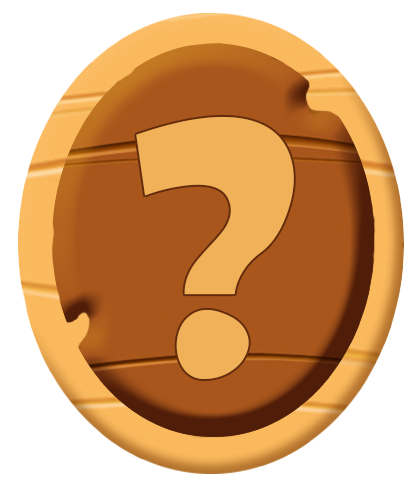
<style>
.page{position:relative;width:419px;height:487px;background:#ffffff}
.page>*{position:absolute;margin:0}
.t1{font:365.5px "SCGumKids";letter-spacing:0.05em;color:#f1b158}
</style>
<div class="page">
<p class="t1" style="left:136px;top:116px;width:158px;height:263px">?</p>
</div>
